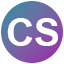
<style>
.page{position:relative;width:64px;height:64px;background:#ffffff}
.page>*{position:absolute;margin:0}
.t1{font:39.1px "Arial-BoldMT";letter-spacing:0.005em;color:#ffffff}
</style>
<div class="page">
<p class="t1" style="left:7px;top:18px;width:51px;height:28px">CS</p>
</div>
